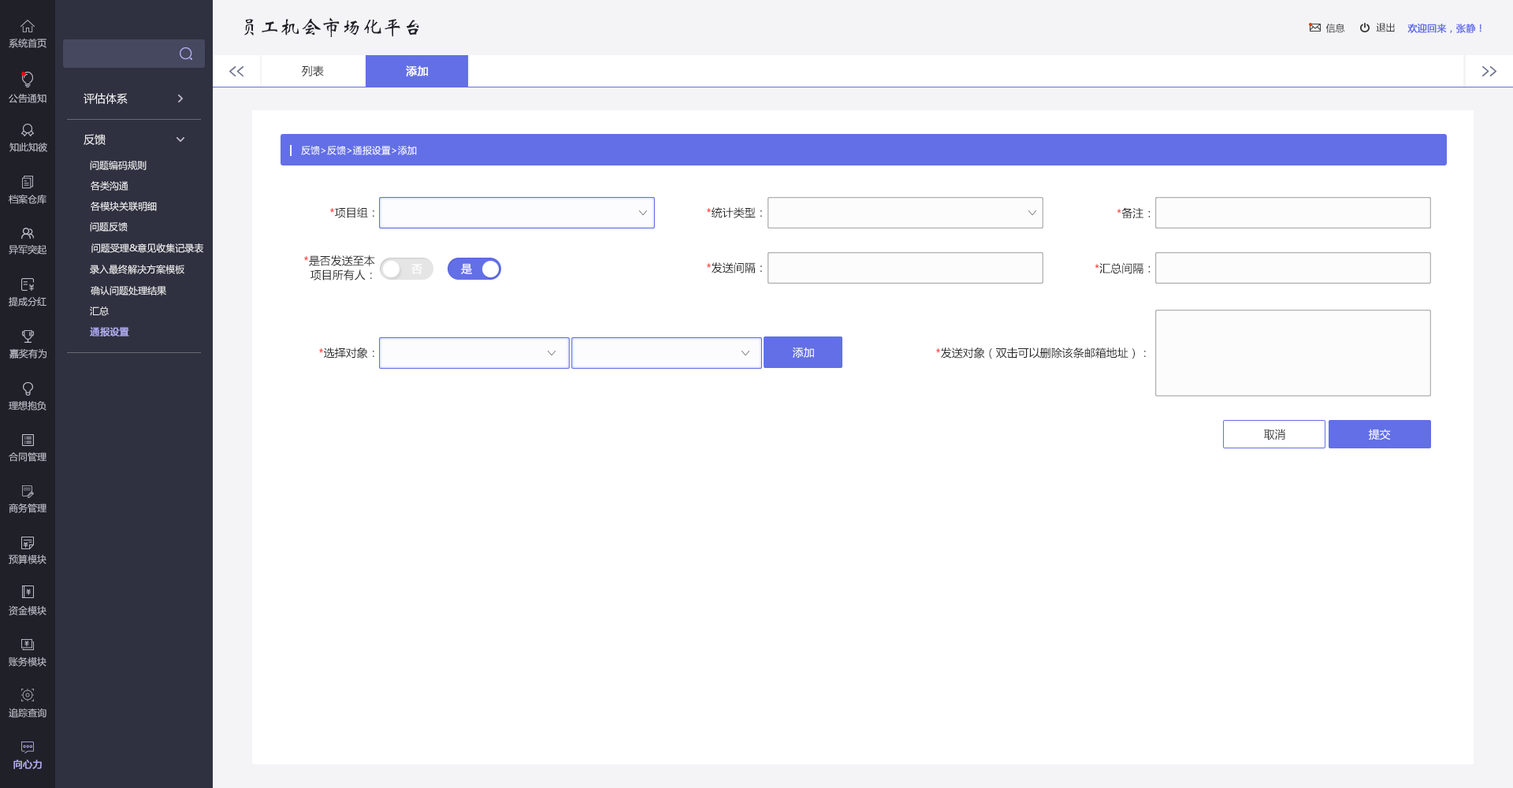
<style>
.page{position:relative;width:1513px;height:788px;background:#ffffff}
.page>*{position:absolute;margin:0}
.t1{font:20.5px "STXinwei";color:#202028}
.t2{font:9.5px "MicrosoftYaHei";color:#333333}
.t3{font:9.5px "MicrosoftYaHei";color:#636fe7;font-weight:bold}
.t4{font:9.5px "MicrosoftYaHei";color:#bfbec9}
.t5{font:11px "MicrosoftYaHei";color:#333333}
.t6{font:11px "MicrosoftYaHei";color:#fefefe;font-weight:bold}
.t7{font:11px "MicrosoftYaHei";color:#f4f4f6}
.t8{font:9.5px "MicrosoftYaHei";color:#ffffff}
.t9{font:9.5px "MicrosoftYaHei";color:#f4f4f6}
.t10{font:11px "MicrosoftYaHei";color:#252525}
.t11{font:11px "MicrosoftYaHei";color:#ff0000}
.t12{font:11px/14.2px "MicrosoftYaHei";color:#252525}
.t13{font:11px/14.2px "MicrosoftYaHei";color:#ff0000}
.t14{font:11px "MicrosoftYaHei";color:#ffffff;text-transform:uppercase}
.t15{font:9.5px "MicrosoftYaHei";color:#b3aef5;font-weight:bold}
.t16{font:11px "MicrosoftYaHei";color:#ffffff}
</style>
<div class="page">
<p class="t1" style="left:244px;top:17px;width:175px;height:20px">员工机会市场化平台</p>
<p class="t2" style="left:1326px;top:24px;width:19px;height:9px">信息</p>
<p class="t2" style="left:1376px;top:23px;width:19px;height:9px">退出</p>
<p class="t3" style="left:1407px;top:24px;width:75px;height:9px">欢迎回来，张静！</p>
<p class="t4" style="left:9px;top:38px;width:37px;height:10px">系统首页</p>
<p class="t5" style="left:302px;top:65px;width:22px;height:11px">列表</p>
<p class="t6" style="left:406px;top:65px;width:22px;height:11px">添加</p>
<p class="t4" style="left:9px;top:94px;width:37px;height:9px">公告通知</p>
<p class="t7" style="left:84px;top:93px;width:44px;height:11px">评估体系</p>
<p class="t7" style="left:84px;top:134px;width:22px;height:11px">反馈</p>
<p class="t4" style="left:9px;top:143px;width:38px;height:9px">知此知彼</p>
<p class="t8" style="left:301px;top:146px;width:116px;height:9px">反馈&gt;反馈&gt;通报设置&gt;添加</p>
<p class="t9" style="left:90px;top:161px;width:57px;height:9px">问题编码规则</p>
<p class="t9" style="left:91px;top:181px;width:37px;height:10px">各类沟通</p>
<p class="t4" style="left:9px;top:194px;width:37px;height:10px">档案仓库</p>
<p class="t9" style="left:91px;top:202px;width:66px;height:9px">各模块关联明细</p>
<p class="t10" style="left:330px;top:207px;width:44px;height:11px"><span class="t11">*</span>项目组：</p>
<p class="t10" style="left:707px;top:207px;width:55px;height:11px"><span class="t11">*</span>统计类型：</p>
<p class="t10" style="left:1117px;top:207px;width:34px;height:12px">*备注：</p>
<p class="t9" style="left:90px;top:222px;width:38px;height:10px">问题反馈</p>
<p class="t4" style="left:9px;top:244px;width:37px;height:11px">异军突起</p>
<p class="t9" style="left:91px;top:244px;width:112px;height:9px">问题受理&amp;意见收集记录表</p>
<p class="t12" style="left:304px;top:255px;width:71px;height:26px"><span class="t13">*</span>是否发送至本<br>  项目所有人：</p>
<p class="t9" style="left:90px;top:264px;width:94px;height:10px">录入最终解决方案模板</p>
<p class="t14" style="left:411px;top:264px;width:11px;height:10px">否</p>
<p class="t14" style="left:461px;top:263px;width:11px;height:11px">是</p>
<p class="t10" style="left:707px;top:262px;width:55px;height:11px"><span class="t11">*</span>发送间隔：</p>
<p class="t10" style="left:1095px;top:262px;width:56px;height:12px"><span class="t11">*</span>汇总间隔：</p>
<p class="t9" style="left:91px;top:286px;width:75px;height:10px">确认问题处理结果</p>
<p class="t4" style="left:9px;top:296px;width:37px;height:11px">提成分红</p>
<p class="t9" style="left:90px;top:307px;width:19px;height:9px">汇总</p>
<p class="t15" style="left:90px;top:327px;width:39px;height:10px">通报设置</p>
<p class="t4" style="left:9px;top:349px;width:37px;height:10px">嘉奖有为</p>
<p class="t10" style="left:319px;top:348px;width:55px;height:11px"><span class="t11">*</span>选择对象：</p>
<p class="t16" style="left:793px;top:347px;width:21px;height:11px">添加</p>
<p class="t10" style="left:936px;top:348px;width:210px;height:11px"><span class="t11">*</span>发送对象（双击可以删除该条邮箱地址）：</p>
<p class="t4" style="left:9px;top:401px;width:37px;height:10px">理想抱负</p>
<p class="t5" style="left:1264px;top:429px;width:21px;height:12px">取消</p>
<p class="t16" style="left:1369px;top:429px;width:22px;height:11px">提交</p>
<p class="t4" style="left:9px;top:452px;width:37px;height:10px">合同管理</p>
<p class="t4" style="left:9px;top:503px;width:37px;height:10px">商务管理</p>
<p class="t4" style="left:9px;top:555px;width:37px;height:9px">预算模块</p>
<p class="t4" style="left:9px;top:605px;width:37px;height:10px">资金模块</p>
<p class="t4" style="left:9px;top:656px;width:37px;height:11px">账务模块</p>
<p class="t4" style="left:9px;top:708px;width:37px;height:10px">追踪查询</p>
<p class="t15" style="left:13px;top:760px;width:29px;height:9px">向心力</p>
</div>
